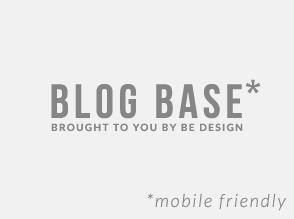
<style>
.page{position:relative;width:294px;height:219px;background:#f1f1f1}
.page>*{position:absolute;margin:0}
.t1{font:47.8px "BebasNeue";letter-spacing:0.1em;color:#868686}
.t2{font:36px "BebasNeue";letter-spacing:0.1em;color:#868686}
.t3{font:10px "Lato-Bold";letter-spacing:0.14em;color:#868686;text-transform:uppercase}
.t4{font:18px "Lato-LightItalic";letter-spacing:0.1em;color:#868686}
</style>
<div class="page">
<p class="t1" style="left:51px;top:84px;width:191px;height:35px">blog base</p>
<p class="t2" style="left:245px;top:79px;width:16px;height:15px">*</p>
<p class="t3" style="left:51px;top:123px;width:192px;height:9px">brought to you by be design</p>
<p class="t4" style="left:147px;top:193px;width:139px;height:18px">*mobile friendly</p>
</div>
